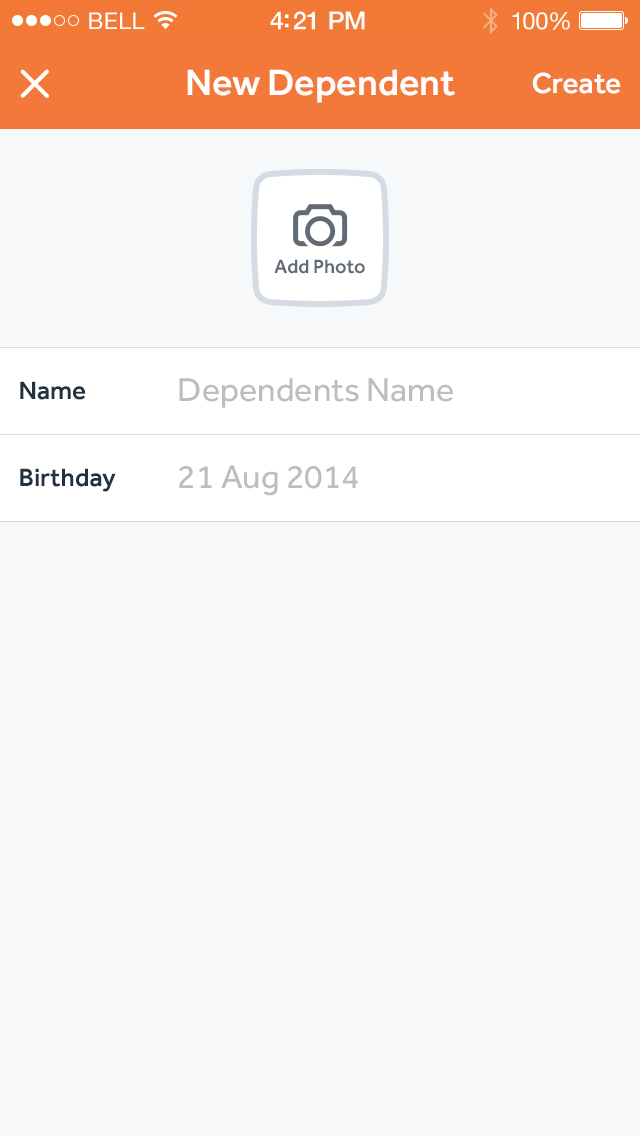
<style>
.page{position:relative;width:640px;height:1136px;background:#f6f8fa}
.page>*{position:absolute;margin:0}
.t1{font:23px "HelveticaNeue";letter-spacing:0.02em;color:#ffffff}
.t2{font:25px "HelveticaNeue-Medium";letter-spacing:-0.02em;color:#ffffff}
.t3{font:24px "HelveticaNeue";letter-spacing:-0.02em;color:#ffffff}
.t4{font:38px "Effra-Medium";color:#ffffff}
.t5{font:30px "Effra-Medium";color:#ffffff}
.t6{font:20px "Effra-Medium";color:#626a73}
.t7{font:26px "Effra-Medium";color:#22313f}
.t8{font:34px "Effra-Regular";color:#bbbdc1}
</style>
<div class="page">
<p class="t1" style="left:89px;top:12px;width:56px;height:17px">BELL</p>
<p class="t2" style="left:270px;top:11px;width:95px;height:19px">4:21 PM</p>
<p class="t3" style="left:512px;top:12px;width:58px;height:18px">100%</p>
<p class="t4" style="left:187px;top:69px;width:268px;height:34px">New Dependent</p>
<p class="t5" style="left:532px;top:72px;width:89px;height:22px">Create</p>
<p class="t6" style="left:274px;top:259px;width:91px;height:15px">Add Photo</p>
<p class="t7" style="left:20px;top:381px;width:66px;height:19px">Name</p>
<p class="t8" style="left:179px;top:378px;width:274px;height:30px">Dependents Name</p>
<p class="t7" style="left:20px;top:468px;width:96px;height:24px">Birthday</p>
<p class="t8" style="left:179px;top:465px;width:179px;height:31px">21 Aug 2014</p>
</div>
